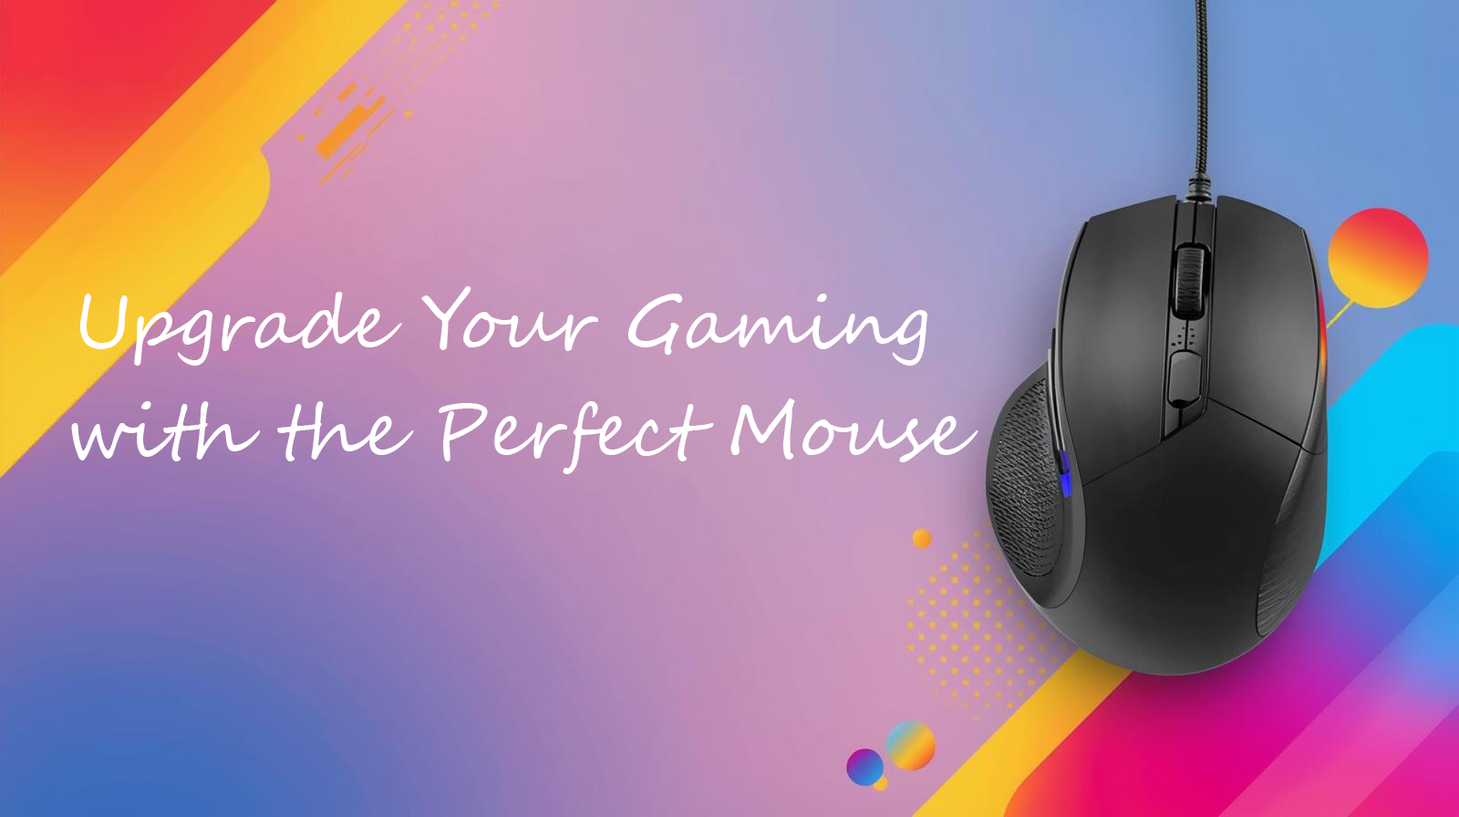
<style>
.page{position:relative;width:1459px;height:817px}
.page>*{position:absolute;margin:0}
.t1{font:73px "SegoeScript";color:#fefefe}
.t2{font:73px "SegoeScript";color:#ffffff}
</style>
<div class="page">
<p class="t1" style="left:71px;top:286px;width:908px;height:188px;text-align:center"><span class="t2">Upgrade Your Gaming <br><br></span>with the Perfect Mouse</p>
</div>
